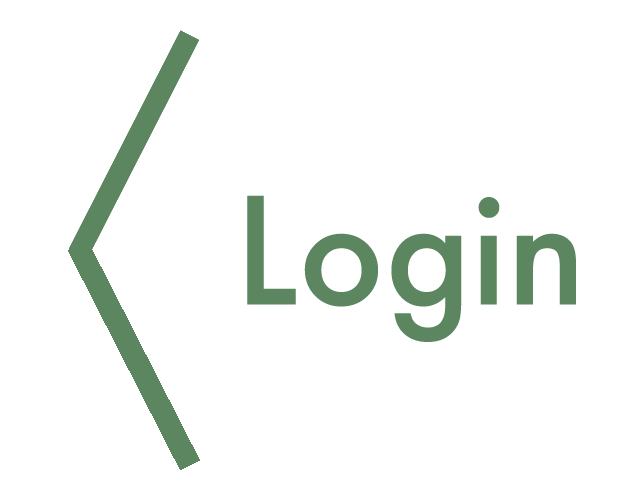
<style>
.page{position:relative;width:640px;height:480px;background:#ffffff}
.page>*{position:absolute;margin:0}
.t1{font:144px "Futura-Medium";color:#5b8660}
</style>
<div class="page">
<p class="t1" style="left:247px;top:195px;width:329px;height:147px">Login</p>
</div>
